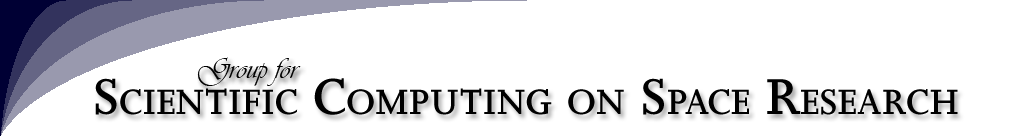
<style>
.page{position:relative;width:1026px;height:136px;background:#ffffff}
.page>*{position:absolute;margin:0}
.t1{font:30px "Vivaldii";color:#000000}
.t2{font:58px "JoannaMTSmBd";color:#000000;font-variant:small-caps}
</style>
<div class="page">
<p class="t1" style="left:197px;top:57px;width:104px;height:29px">Group for</p>
<p class="t2" style="left:95px;top:78px;width:863px;height:37px">Scientific Computing on Space Research</p>
</div>
